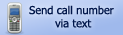
<style>
.page{position:relative;width:123px;height:35px}
.page>*{position:absolute;margin:0}
.t1{font:11px "Tahoma";color:#00164a}
</style>
<div class="page">
<p class="t1" style="left:29px;top:5px;width:85px;height:23px;text-align:center">Send call number <br>via text</p>
</div>
